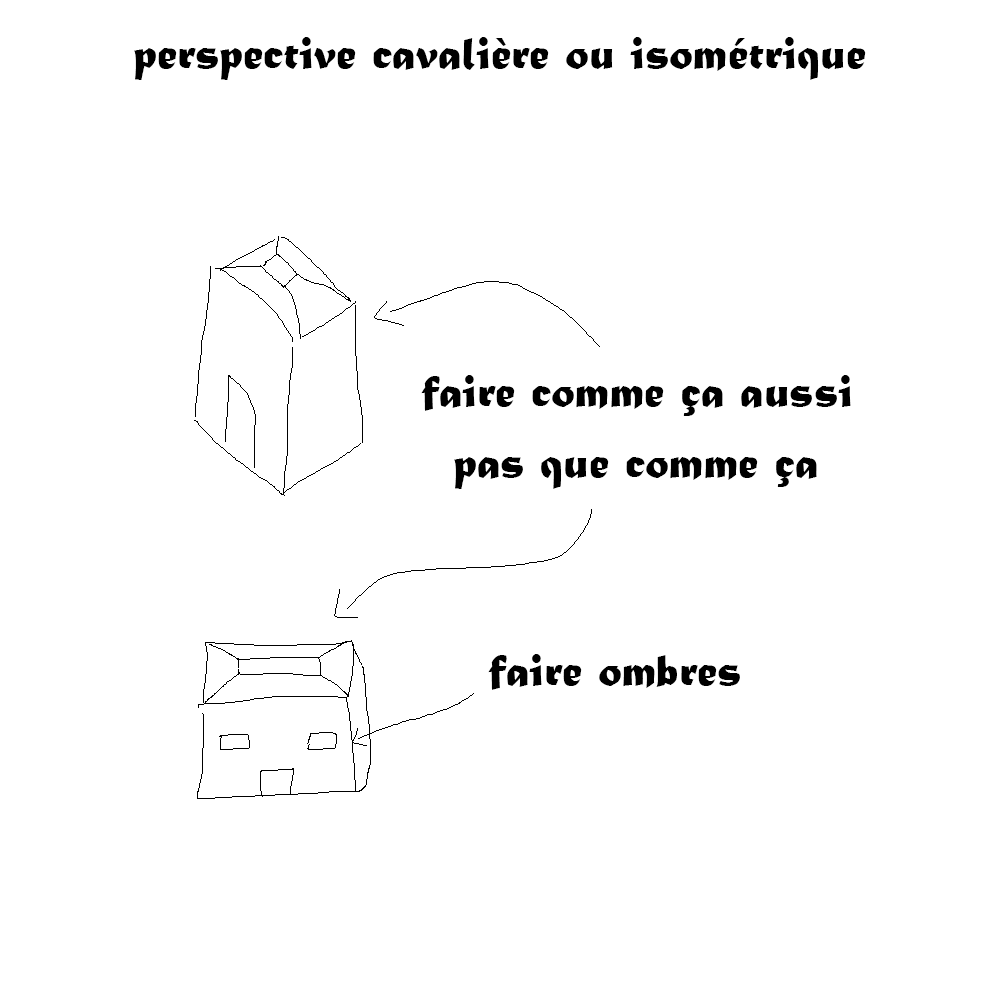
<style>
.page{position:relative;width:1000px;height:1000px;background:#ffffff}
.page>*{position:absolute;margin:0}
.t1{font:48px "MaturaMTScriptCapitals";color:#000000}
</style>
<div class="page">
<p class="t1" style="left:134px;top:37px;width:732px;height:43px">perspective cavalière ou isométrique</p>
<p class="t1" style="left:421px;top:375px;width:430px;height:41px">faire comme ça aussi</p>
<p class="t1" style="left:454px;top:457px;width:363px;height:32px">pas que comme ça</p>
<p class="t1" style="left:488px;top:654px;width:252px;height:36px">faire ombres</p>
</div>
